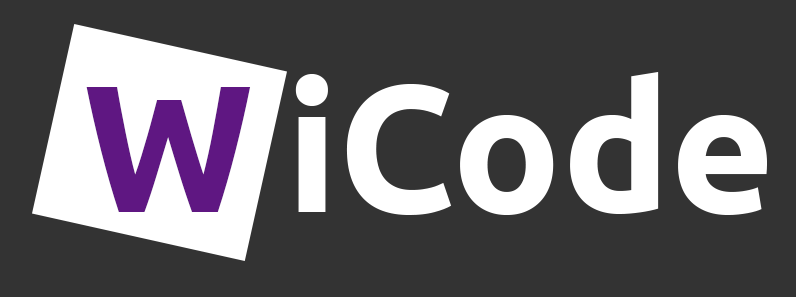
<style>
.page{position:relative;width:796px;height:297px;background:#333333}
.page>*{position:absolute;margin:0}
.t1{font:180px "Ubuntu-Bold";color:#ffffff}
.t2{font:180px "Ubuntu-Bold";color:#5f1782}
</style>
<div class="page">
<p class="t1" style="left:295px;top:71px;width:472px;height:144px">iCode</p>
<p class="t2" style="left:86px;top:87px;width:165px;height:125px">W</p>
</div>
